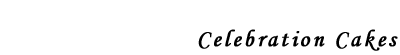
<style>
.page{position:relative;width:400px;height:55px;background:#ffffff}
.page>*{position:absolute;margin:0}
.t1{font:24px "MonotypeCorsiva";letter-spacing:0.1em;color:#000000;font-weight:bold}
</style>
<div class="page">
<p class="t1" style="left:198px;top:29px;width:200px;height:22px">Celebration Cakes</p>
</div>
